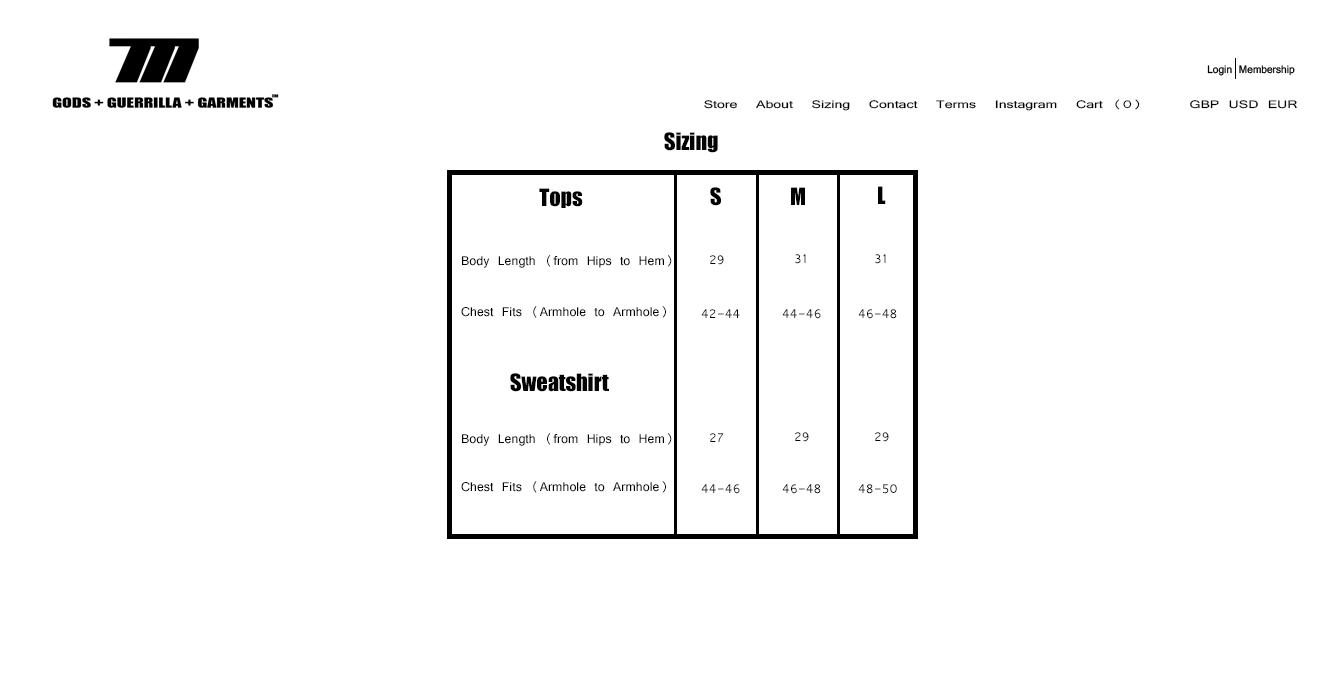
<style>
.page{position:relative;width:1332px;height:683px;background:#ffffff}
.page>*{position:absolute;margin:0}
.t1{font:11.7px "Vrinda";color:#000000;scale:1.35 1}
.t2{font:22.2px "Impact";color:#020202}
.t3{font:13.9px "Vrinda";color:#020202}
.t4{font:13.9px "Vrinda"}
</style>
<div class="page">
<p class="t1" style="left:704px;top:99px;width:593px;height:12px">Store  About  Sizing  Contact  Terms  Instagram  Cart (0)     GBP USD EUR</p>
<p class="t2" style="left:664px;top:132px;width:54px;height:21px">Sizing</p>
<p class="t2" style="left:539px;top:188px;width:44px;height:20px">Tops</p>
<p class="t2" style="left:710px;top:187px;width:11px;height:19px">S</p>
<p class="t2" style="left:791px;top:187px;width:14px;height:18px">M</p>
<p class="t2" style="left:878px;top:186px;width:8px;height:18px">L</p>
<p class="t3" style="left:462px;top:255px;width:210px;height:13px">Body Length (from Hips to Hem)</p>
<p class="t3" style="left:710px;top:255px;width:14px;height:10px">29</p>
<p class="t3" style="left:795px;top:254px;width:11px;height:10px">31</p>
<p class="t3" style="left:875px;top:254px;width:11px;height:10px">31</p>
<p class="t3" style="left:461px;top:306px;width:205px;height:12px">Chest Fits (Armhole to Armhole)</p>
<p class="t3" style="left:701px;top:309px;width:39px;height:9px">42-44</p>
<p class="t4" style="left:782px;top:309px;width:39px;height:10px">44-46</p>
<p class="t3" style="left:858px;top:309px;width:39px;height:10px">46-48</p>
<p class="t2" style="left:510px;top:373px;width:99px;height:19px">Sweatshirt</p>
<p class="t3" style="left:462px;top:433px;width:210px;height:13px">Body Length (from Hips to Hem)</p>
<p class="t3" style="left:710px;top:433px;width:14px;height:9px">27</p>
<p class="t3" style="left:795px;top:432px;width:14px;height:10px">29</p>
<p class="t3" style="left:875px;top:432px;width:14px;height:10px">29</p>
<p class="t3" style="left:461px;top:481px;width:205px;height:12px">Chest Fits (Armhole to Armhole)</p>
<p class="t4" style="left:701px;top:484px;width:39px;height:10px">44-46</p>
<p class="t3" style="left:782px;top:484px;width:39px;height:10px">46-48</p>
<p class="t3" style="left:858px;top:484px;width:39px;height:10px">48-50</p>
</div>
